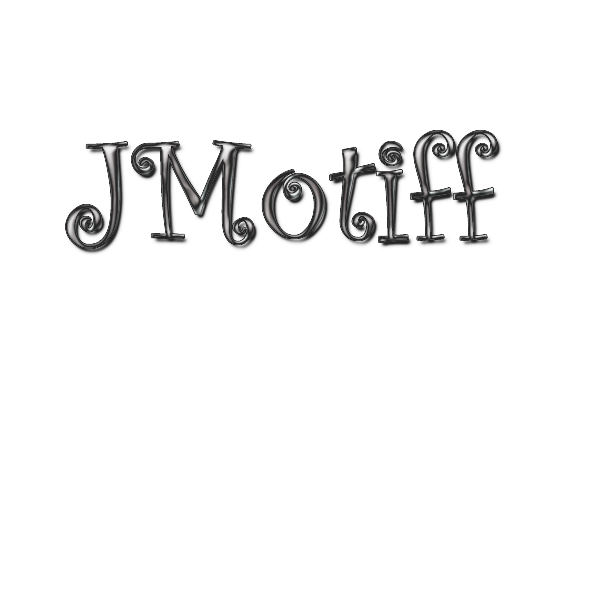
<style>
.page{position:relative;width:600px;height:600px;background:#ffffff}
.page>*{position:absolute;margin:0}
.t1{font:150px "CurlzMT"}
</style>
<div class="page">
<p class="t1" style="left:66px;top:131px;width:431px;height:117px">JMotiff</p>
</div>
